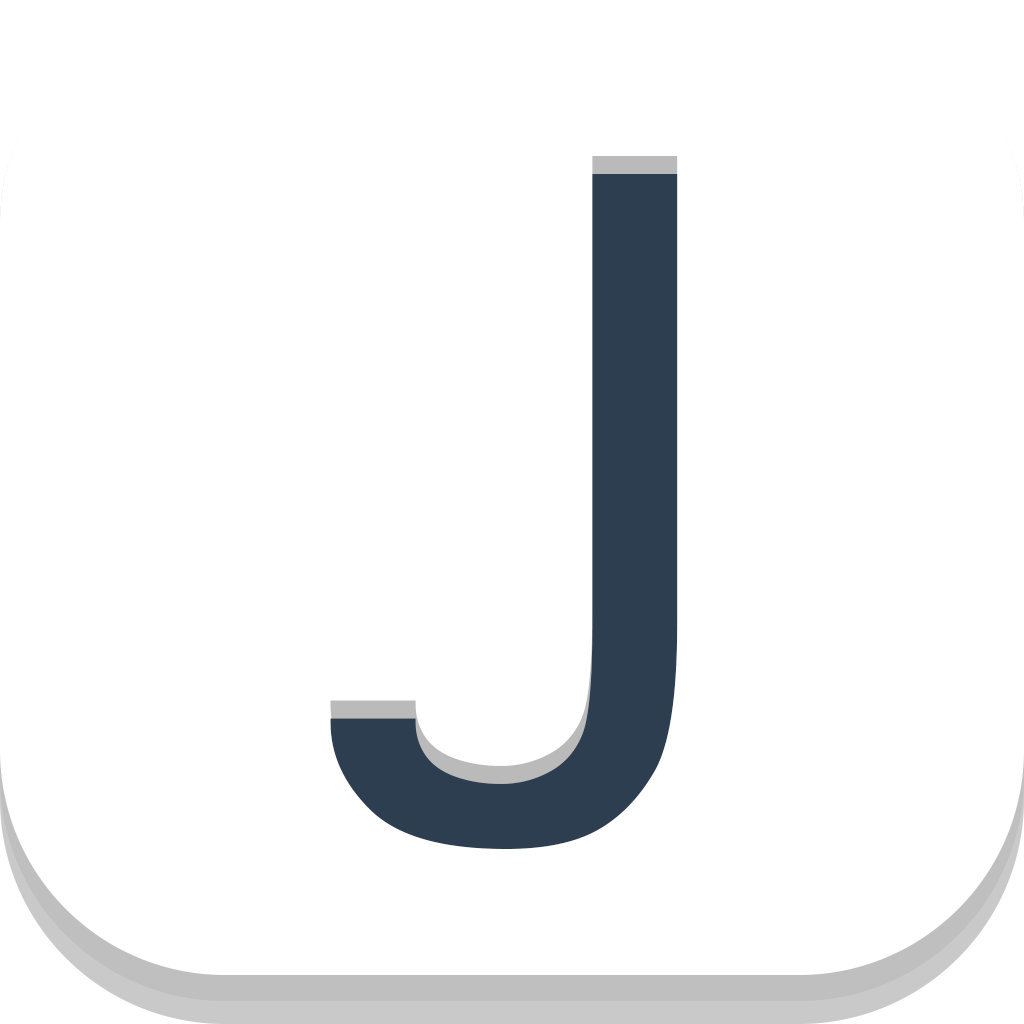
<style>
.page{position:relative;width:1024px;height:1024px;background:#ffffff}
.page>*{position:absolute;margin:0}
.t1{font:864px "Thonburi";color:#2c3e50}
</style>
<div class="page">
<p class="t1" style="left:330px;top:156px;width:348px;height:675px">J</p>
<p class="t1" style="left:330px;top:174px;width:348px;height:675px">J</p>
</div>
